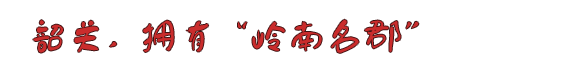
<style>
.page{position:relative;width:586px;height:76px;background:#ffffff}
.page>*{position:absolute;margin:0}
.t1{font:38px "FZZJ-TTMBFONT";color:#ca2c2c}
</style>
<div class="page">
<p class="t1" style="left:33px;top:19px;width:386px;height:34px">韶关，拥有“岭南名郡”</p>
</div>
